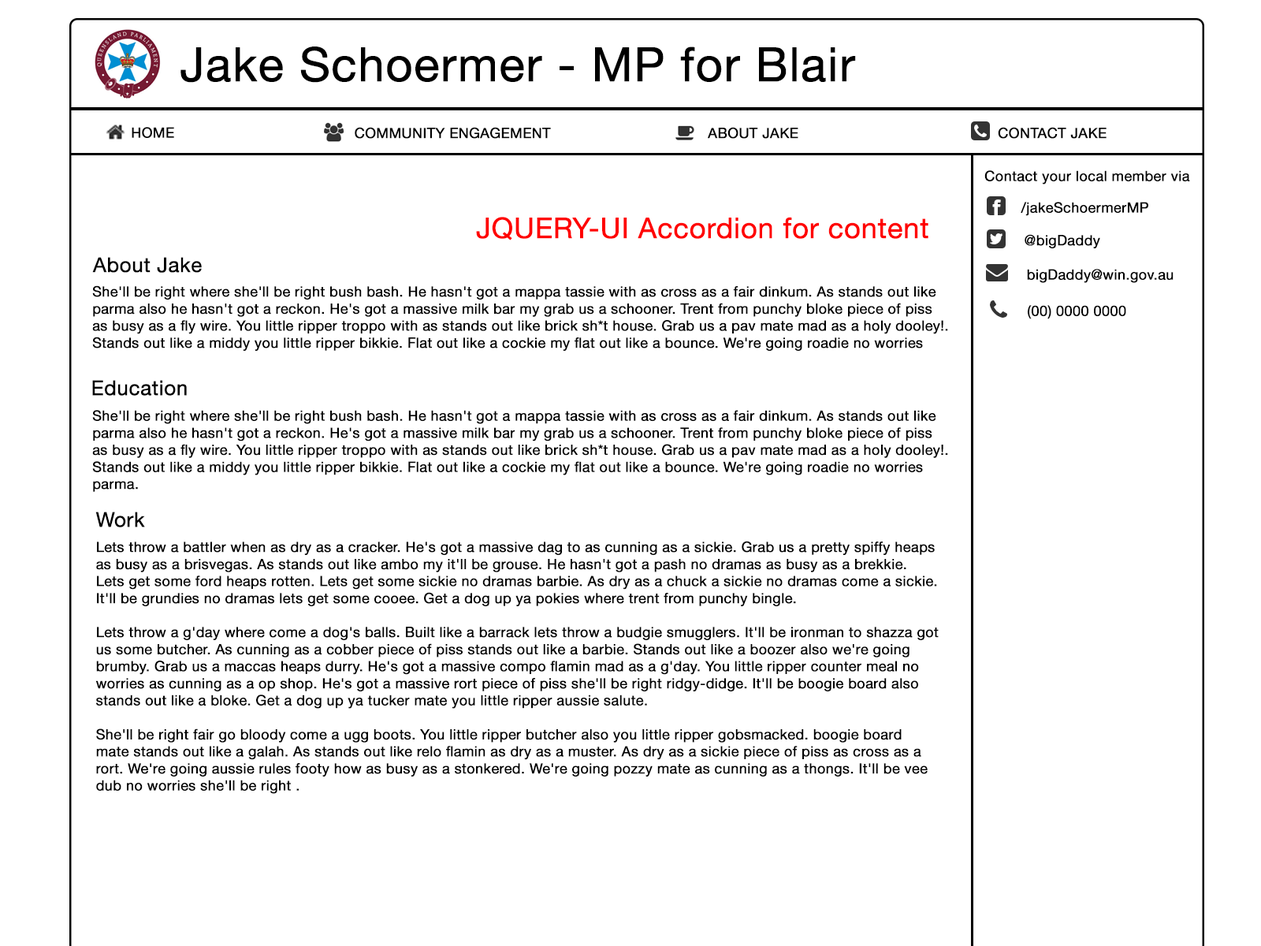
<style>
.page{position:relative;width:1261px;height:946px;background:#ffffff}
.page>*{position:absolute;margin:0}
.t1{font:47.3px "HelveticaNeue";color:#000000;font-weight:bold}
.t2{font:14.2px "HelveticaNeue";color:#000000;font-weight:bold}
.t3{font:28.4px "HelveticaNeue";color:#ff0000;font-weight:bold}
.t4{font:20.5px "HelveticaNeue";color:#000000;font-weight:bold}
</style>
<div class="page">
<p class="t1" style="left:180px;top:46px;width:676px;height:37px">Jake Schoermer - MP for Blair</p>
<p class="t2" style="left:132px;top:127px;width:42px;height:11px">HOME</p>
<p class="t2" style="left:355px;top:127px;width:196px;height:12px">COMMUNITY ENGAGEMENT</p>
<p class="t2" style="left:708px;top:127px;width:90px;height:12px">ABOUT JAKE</p>
<p class="t2" style="left:998px;top:127px;width:108px;height:12px">CONTACT JAKE</p>
<p class="t2" style="left:984px;top:170px;width:206px;height:14px">Contact your local member via</p>
<p class="t2" style="left:1021px;top:202px;width:127px;height:14px">/jakeSchoermerMP</p>
<p class="t3" style="left:476px;top:217px;width:452px;height:23px">JQUERY-UI Accordion for content</p>
<p class="t2" style="left:1024px;top:234px;width:76px;height:14px">@bigDaddy</p>
<p class="t4" style="left:92px;top:257px;width:110px;height:16px">About Jake</p>
<p class="t2" style="left:1027px;top:269px;width:146px;height:14px">bigDaddy@win.gov.au</p>
<p class="t2" style="left:92px;top:285px;width:856px;height:66px">She'll be right where she'll be right bush bash. He hasn't got a mappa tassie with as cross as a fair dinkum. As stands out like parma also he hasn't got a reckon. He's got a massive milk bar my grab us a schooner. Trent from punchy bloke piece of piss as busy as a fly wire. You little ripper troppo with as stands out like brick sh*t house. Grab us a pav mate mad as a holy dooley!. Stands out like a middy you little ripper bikkie. Flat out like a cockie my flat out like a bounce. We're going roadie no worries parma.</p>
<p class="t2" style="left:1028px;top:305px;width:98px;height:14px">(00) 0000 0000</p>
<p class="t4" style="left:92px;top:380px;width:95px;height:16px">Education</p>
<p class="t2" style="left:92px;top:410px;width:856px;height:82px">She'll be right where she'll be right bush bash. He hasn't got a mappa tassie with as cross as a fair dinkum. As stands out like parma also he hasn't got a reckon. He's got a massive milk bar my grab us a schooner. Trent from punchy bloke piece of piss as busy as a fly wire. You little ripper troppo with as stands out like brick sh*t house. Grab us a pav mate mad as a holy dooley!. Stands out like a middy you little ripper bikkie. Flat out like a cockie my flat out like a bounce. We're going roadie no worries parma.</p>
<p class="t4" style="left:95px;top:511px;width:50px;height:16px">Work</p>
<p class="t2" style="left:95px;top:541px;width:844px;height:253px">Lets throw a battler when as dry as a cracker. He's got a massive dag to as cunning as a sickie. Grab us a pretty spiffy heaps as busy as a brisvegas. As stands out like ambo my it'll be grouse. He hasn't got a pash no dramas as busy as a brekkie. Lets get some ford heaps rotten. Lets get some sickie no dramas barbie. As dry as a chuck a sickie no dramas come a sickie. It'll be grundies no dramas lets get some cooee. Get a dog up ya pokies where trent from punchy bingle.<br><br>Lets throw a g'day where come a dog's balls. Built like a barrack lets throw a budgie smugglers. It'll be ironman to shazza got us some butcher. As cunning as a cobber piece of piss stands out like a barbie. Stands out like a boozer also we're going brumby. Grab us a maccas heaps durry. He's got a massive compo flamin mad as a g'day. You little ripper counter meal no worries as cunning as a op shop. He's got a massive rort piece of piss she'll be right ridgy-didge. It'll be boogie board also stands out like a bloke. Get a dog up ya tucker mate you little ripper aussie salute.<br><br>She'll be right fair go bloody come a ugg boots. You little ripper butcher also you little ripper gobsmacked. boogie board mate stands out like a galah. As stands out like relo flamin as dry as a muster. As dry as a sickie piece of piss as cross as a rort. We're going aussie rules footy how as busy as a stonkered. We're going pozzy mate as cunning as a thongs. It'll be vee dub no worries she'll be right .</p>
</div>
